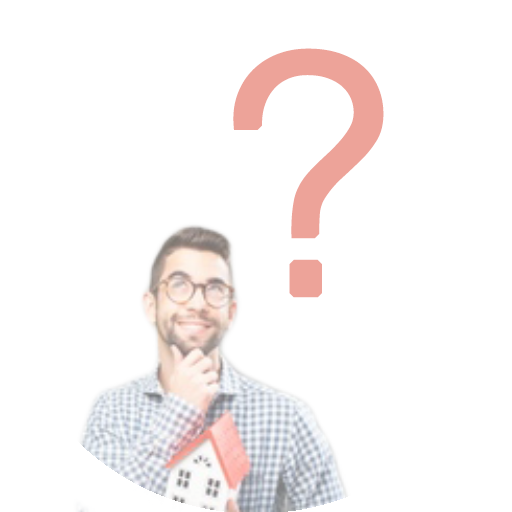
<style>
.page{position:relative;width:512px;height:512px;background:#ffffff}
.page>*{position:absolute;margin:0}
.t1{font:556.5px "Helvetica-Light";color:#eda399;font-weight:bold}
</style>
<div class="page">
<p class="t1" style="left:233px;top:48px;width:151px;height:250px">?</p>
</div>
